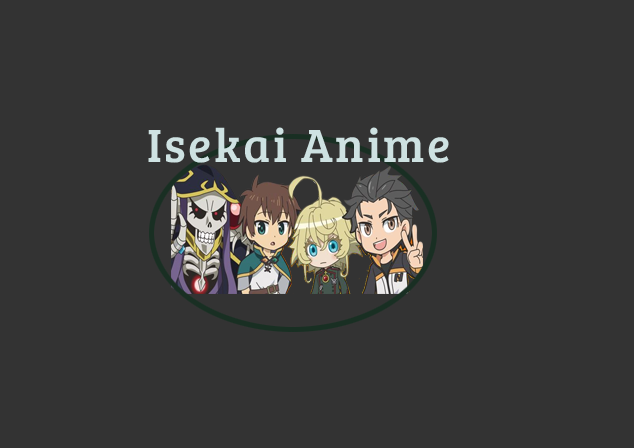
<style>
.page{position:relative;width:634px;height:448px;background:#333333}
.page>*{position:absolute;margin:0}
.t1{font:48px "BreeSerif-Regular";letter-spacing:0.05em;color:#cee2e2}
</style>
<div class="page">
<p class="t1" style="left:148px;top:127px;width:301px;height:36px">Isekai Anime</p>
</div>
